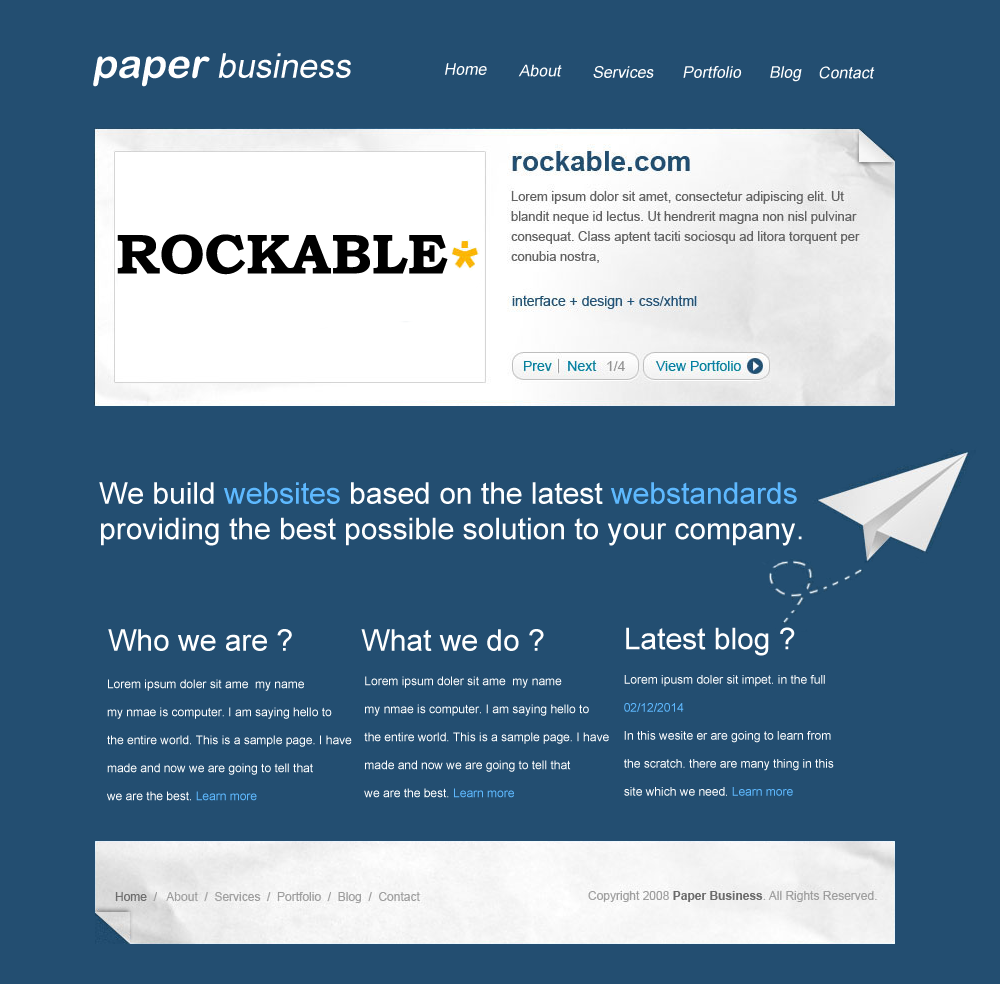
<style>
.page{position:relative;width:1000px;height:984px;background:#234e71}
.page>*{position:absolute;margin:0}
.t1{font:34px "ArialMT";color:#ffffff;font-style:italic}
.t2{font:40px "ArialRoundedMTBold";color:#ffffff;font-style:italic}
.t3{font:16px "ArialMT";color:#ffffff;font-style:italic}
.t4{font:56px "BookmanOldStyle-Bold";color:#000000}
.t5{font:30px "ArialMT";color:#ffffff}
.t6{font:30px "ArialMT";color:#5eb9ff}
.t7{font:12px/16px "ArialMT";color:#ffffff}
.t8{font:12px/16px "ArialMT";color:#5eb9ff}
</style>
<div class="page">
<p class="t1" style="left:93px;top:53px;width:258px;height:34px"><span class="t2">paper </span>business</p>
<p class="t3" style="left:445px;top:63px;width:42px;height:12px">Home</p>
<p class="t3" style="left:518px;top:64px;width:44px;height:13px">About</p>
<p class="t3" style="left:593px;top:66px;width:61px;height:12px">Services</p>
<p class="t3" style="left:683px;top:66px;width:59px;height:12px">Portfolio</p>
<p class="t3" style="left:770px;top:66px;width:32px;height:16px">Blog</p>
<p class="t3" style="left:819px;top:66px;width:56px;height:13px">Contact</p>
<p class="t4" style="left:117px;top:234px;width:331px;height:41px">ROCKABLE</p>
<p class="t5" style="left:99px;top:482px;width:698px;height:22px">We build <span class="t6">websites </span>based on the latest <span class="t6">webstandards</span></p>
<p class="t5" style="left:101px;top:517px;width:701px;height:29px">providing the best possible solution to your company.</p>
<p class="t5" style="left:108px;top:629px;width:184px;height:22px">Who we are ?</p>
<p class="t5" style="left:361px;top:629px;width:183px;height:22px">What we do ?</p>
<p class="t5" style="left:626px;top:627px;width:169px;height:29px">Latest blog ?</p>
<p class="t7" style="left:364px;top:676px;width:245px;height:122px">Lorem ipsum doler sit ame  my name<br>my nmae is computer. I am saying hello to<br>the entire world. This is a sample page. I have<br>made and now we are going to tell that<br>we are the best. <span class="t8">Learn more</span></p>
<p class="t7" style="left:624px;top:675px;width:210px;height:121px">Lorem ipusm doler sit impet. in the full<br><span class="t8">02/12/2014<br></span>In this wesite er are going to learn from <br>the scratch. there are many thing in this<br>site which we need. <span class="t8">Learn more</span></p>
<p class="t7" style="left:107px;top:679px;width:245px;height:122px">Lorem ipsum doler sit ame  my name<br>my nmae is computer. I am saying hello to<br>the entire world. This is a sample page. I have<br>made and now we are going to tell that<br>we are the best. <span class="t8">Learn more</span></p>
</div>
